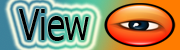
<style>
.page{position:relative;width:180px;height:50px}
.page>*{position:absolute;margin:0}
.t1{font:42.5px "Tahoma";color:#000000;scale:0.79 1}
</style>
<div class="page">
<p class="t1" style="left:19px;top:9px;width:70px;height:32px">View</p>
</div>
